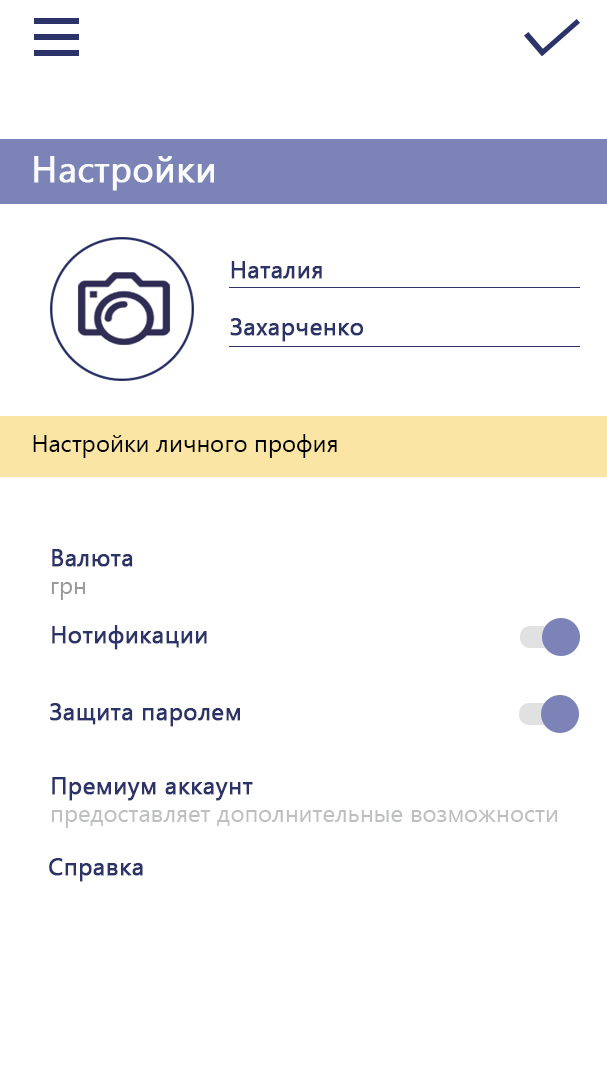
<style>
.page{position:relative;width:607px;height:1080px;background:#ffffff}
.page>*{position:absolute;margin:0}
.t1{font:36px "YuGothicUI-Regular";color:#fbfcff;font-weight:bold}
.t2{font:24px "YuGothicUI-Regular";color:#2b3368;font-weight:bold}
.t3{font:24px "YuGothicUI-Regular";color:#000000}
.t4{font:24px "YuGothicUI-Regular";color:#999999}
.t5{font:24px "YuGothicUI-Regular";color:#bebfc0}
</style>
<div class="page">
<p class="t1" style="left:34px;top:156px;width:180px;height:35px">Настройки</p>
<p class="t2" style="left:230px;top:261px;width:133px;height:81px">Наталия<br><br>Захарченко</p>
<p class="t3" style="left:33px;top:434px;width:304px;height:24px">Настройки личного профия</p>
<p class="t2" style="left:51px;top:549px;width:82px;height:51px">Валюта<br><span class="t4">грн</span></p>
<p class="t2" style="left:52px;top:625px;width:155px;height:25px">Нотификации</p>
<p class="t2" style="left:50px;top:703px;width:190px;height:24px">Защита паролем</p>
<p class="t5" style="left:51px;top:777px;width:507px;height:51px"><span class="t2">Премиум аккаунт<br></span>предоставляет дополнительные возможности</p>
<p class="t2" style="left:49px;top:858px;width:94px;height:24px">Справка</p>
</div>
